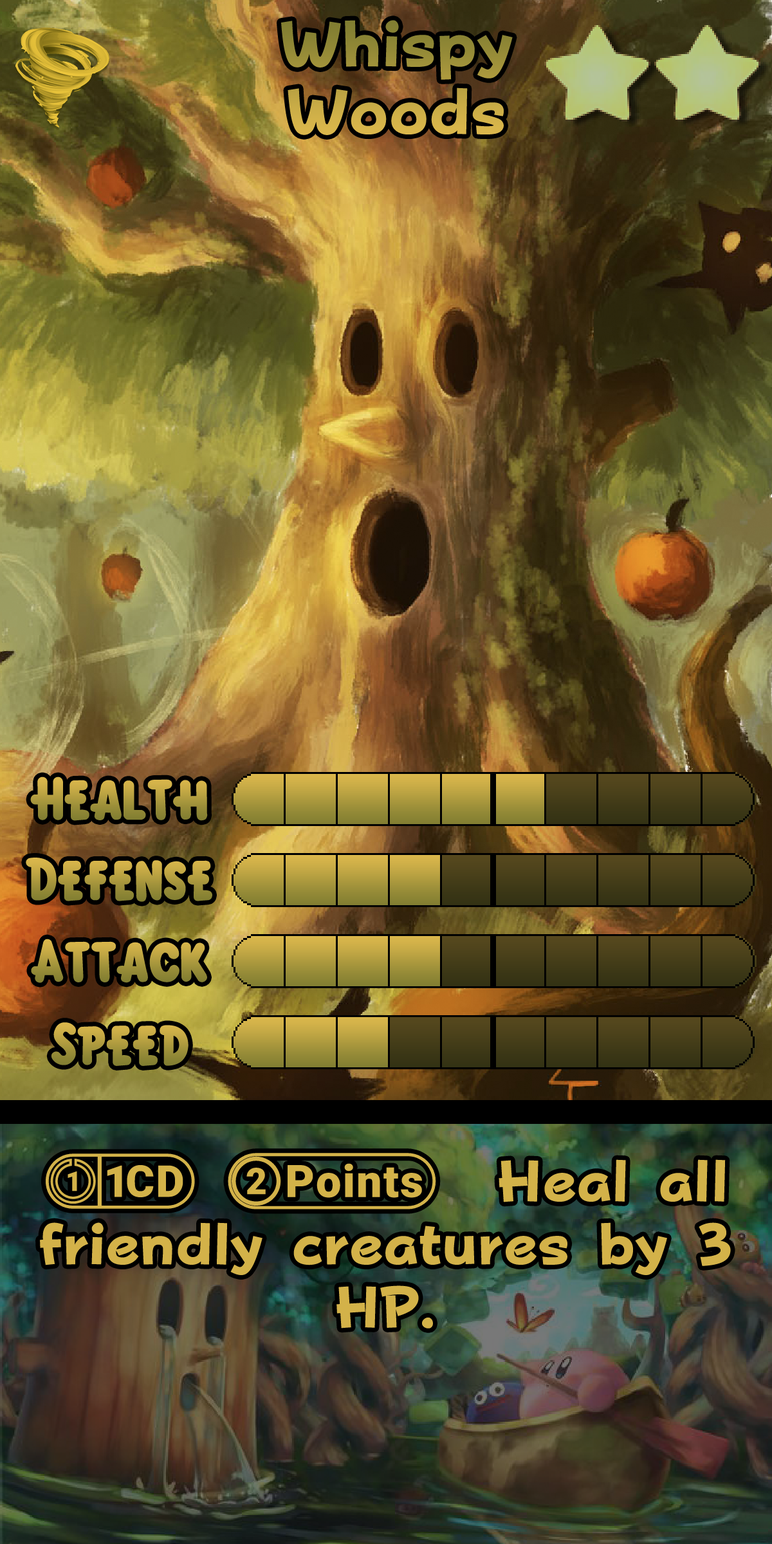
<style>
.page{position:relative;width:772px;height:1544px}
.page>*{position:absolute;margin:0}
.t1{font:110px/67.6px "FOTPopHappinessStrp-ExtraBold"}
.t2{font:92.7px "KirbyClassic"}
.t3{font:99.1px/63.1px "FOTPopHappinessStrp-ExtraBold";color:#d3b249}
.t4{font:99.1px/63.1px "stoogedings-Regular";letter-spacing:0.5em;color:#d3b249}
.t5{font:101.1px/63.1px "stoogedings-Regular";letter-spacing:0.5em;color:#d3b249}
</style>
<div class="page">
<p class="t1" style="left:281px;top:20px;width:232px;height:115px;text-align:center">Whispy<br>Woods</p>
<p class="t2" style="left:30px;top:777px;width:178px;height:44px">Health</p>
<p class="t2" style="left:26px;top:858px;width:186px;height:44px">Defense</p>
<p class="t2" style="left:31px;top:939px;width:176px;height:44px">Attack</p>
<p class="t2" style="left:51px;top:1022px;width:138px;height:44px">Speed</p>
<p class="t3" style="left:40px;top:1153px;width:691px;height:176px;text-align:center"><span class="t4">(1CD)</span><span class="t5">(2 points)</span> Heal all friendly creatures by 3 HP.</p>
</div>
